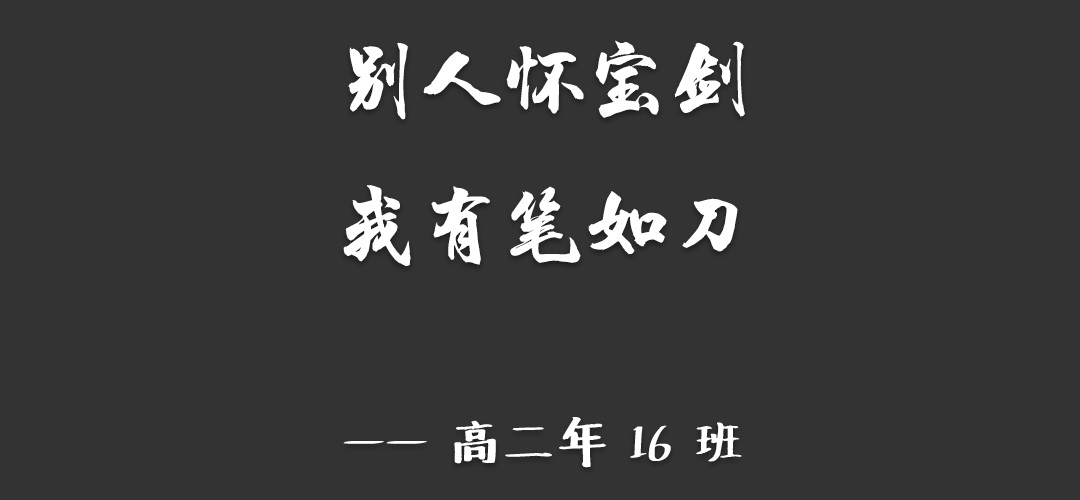
<style>
.page{position:relative;width:1080px;height:500px;background:#333333}
.page>*{position:absolute;margin:0}
.t1{font:83.3px "HYChengXingJ";color:#ffffff}
.t2{font:50px "Undefined";color:#ffffff}
</style>
<div class="page">
<p class="t1" style="left:343px;top:40px;width:402px;height:428px;text-align:center">别人怀宝剑<br>我有笔如刀<br><span class="t2"><br>—— 高二年 16 班</span></p>
</div>
